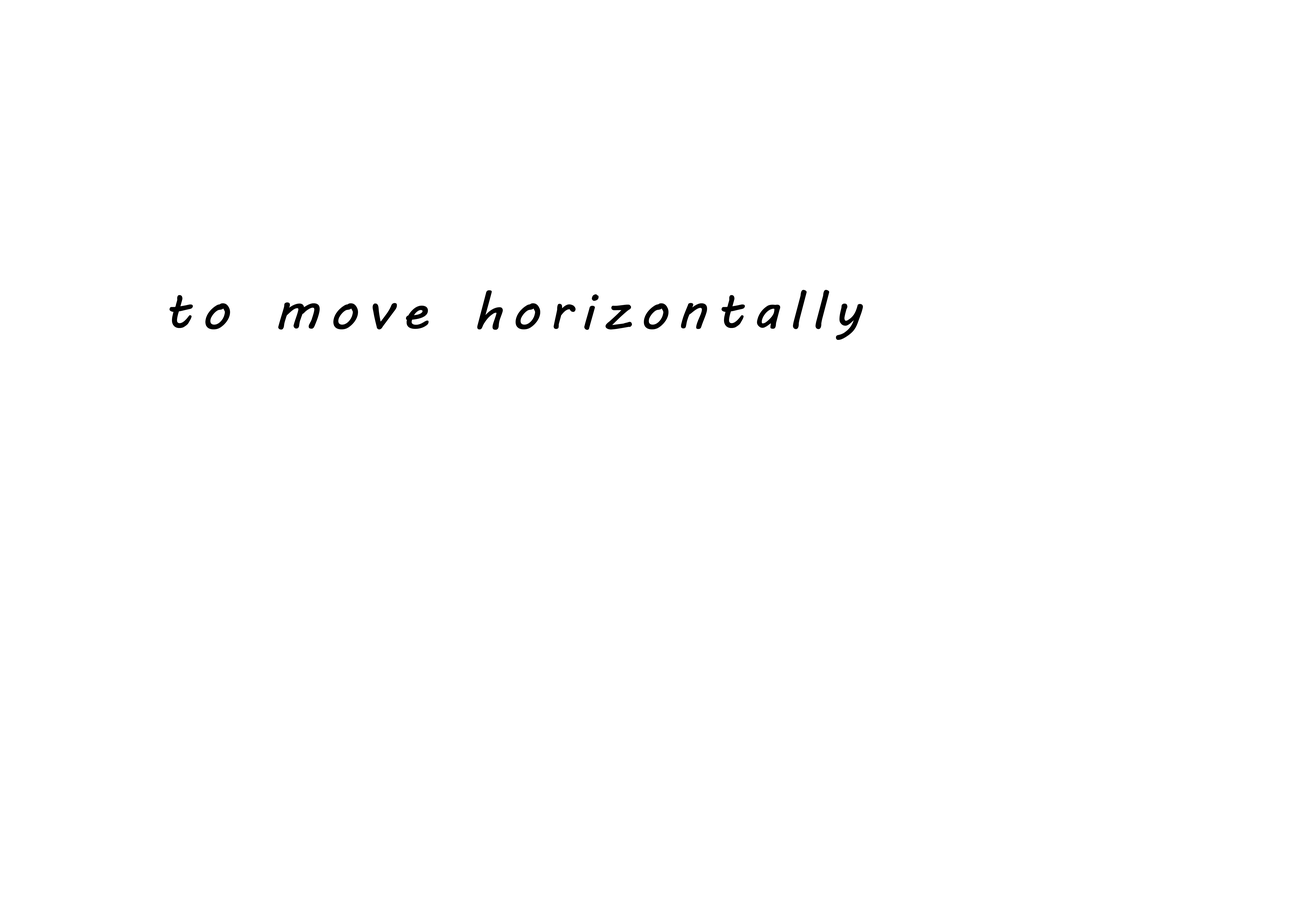
<style>
.page{position:relative;width:1292px;height:923px;background:#ffffff}
.page>*{position:absolute;margin:0}
.t1{font:51.1px "MVBoli";letter-spacing:0.14em;color:#000000;font-weight:bold;scale:1.05 1}
</style>
<div class="page">
<p class="t1" style="left:170px;top:290px;width:693px;height:50px">to move horizontally</p>
</div>
